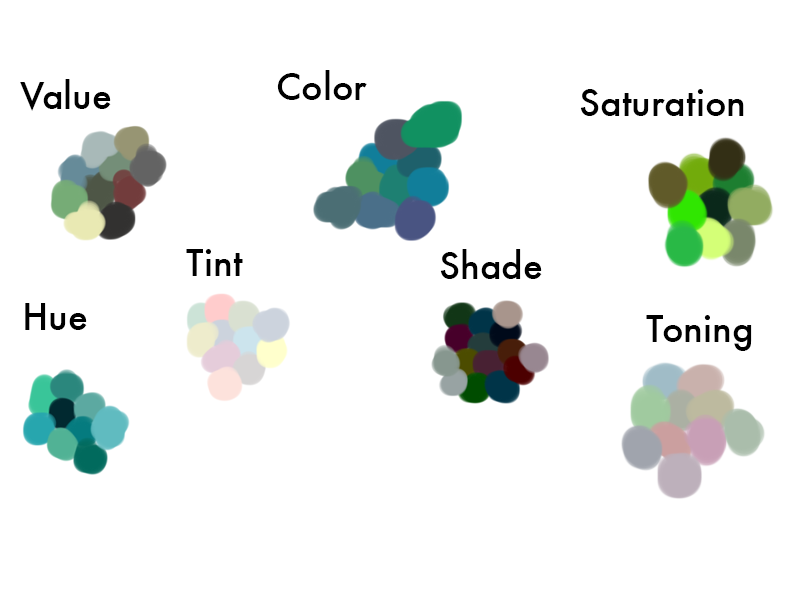
<style>
.page{position:relative;width:800px;height:600px;background:#ffffff}
.page>*{position:absolute;margin:0}
.t1{font:36px "Futura-Medium";color:#000000}
</style>
<div class="page">
<p class="t1" style="left:277px;top:70px;width:90px;height:30px">Color</p>
<p class="t1" style="left:20px;top:79px;width:91px;height:32px">Value</p>
<p class="t1" style="left:580px;top:89px;width:164px;height:27px">Saturation</p>
<p class="t1" style="left:186px;top:249px;width:57px;height:27px">Tint</p>
<p class="t1" style="left:440px;top:249px;width:102px;height:30px">Shade</p>
<p class="t1" style="left:25px;top:303px;width:62px;height:27px">Hue</p>
<p class="t1" style="left:646px;top:315px;width:106px;height:36px">Toning</p>
</div>
